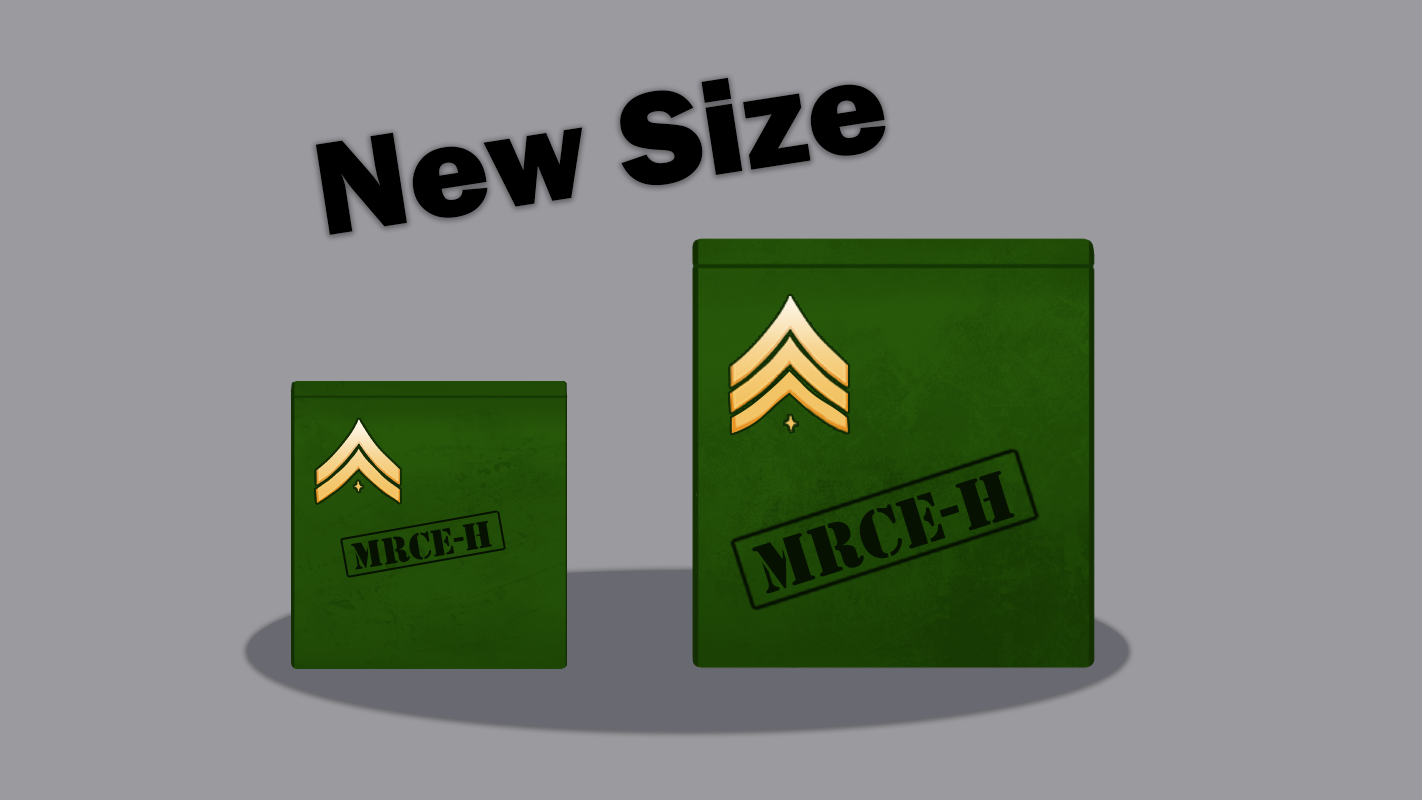
<style>
.page{position:relative;width:1422px;height:800px;background:#9a9a9f}
.page>*{position:absolute;margin:0}
.t1{font:137px "FranklinGothic-Heavy";color:#000000}
.t2{font:72.8px "Stencil";color:#061102}
.t3{font:39px "Stencil";color:#061102}
</style>
<div class="page">
<p class="t1" style="left:315px;top:77px;width:571px;height:158px;rotate:-9deg">New Size</p>
<p class="t2" style="left:752px;top:470px;width:263px;height:124px;rotate:-17deg">MRCE-H</p>
<p class="t3" style="left:351px;top:520px;width:141px;height:50px;rotate:-10deg">MRCE-H</p>
</div>
